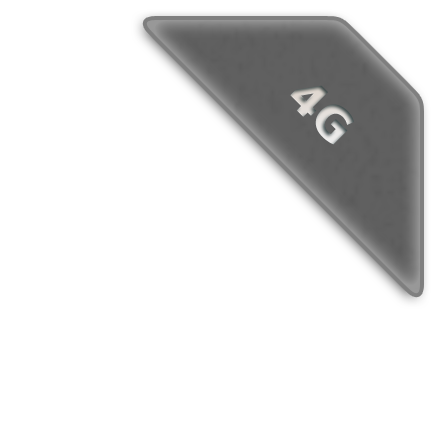
<style>
.page{position:relative;width:440px;height:440px;background:#ffffff}
.page>*{position:absolute;margin:0}
.t1{font:48px "mplus-1p-black"}
</style>
<div class="page">
<p class="t1" style="left:290px;top:85px;width:64px;height:60px;rotate:45deg">4G</p>
</div>
